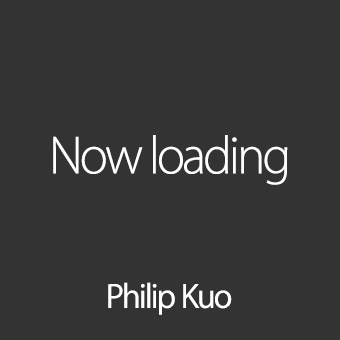
<style>
.page{position:relative;width:340px;height:340px;background:#333333}
.page>*{position:absolute;margin:0}
.t1{font:54px "MyriadSetPro-Thin";letter-spacing:-0.055em;color:#ffffff}
.t2{font:35px "MyriadSetPro-Text";letter-spacing:-0.055em;color:#ffffff}
</style>
<div class="page">
<p class="t1" style="left:53px;top:135px;width:235px;height:50px">Now loading</p>
<p class="t2" style="left:108px;top:282px;width:124px;height:33px">Philip Kuo</p>
</div>
